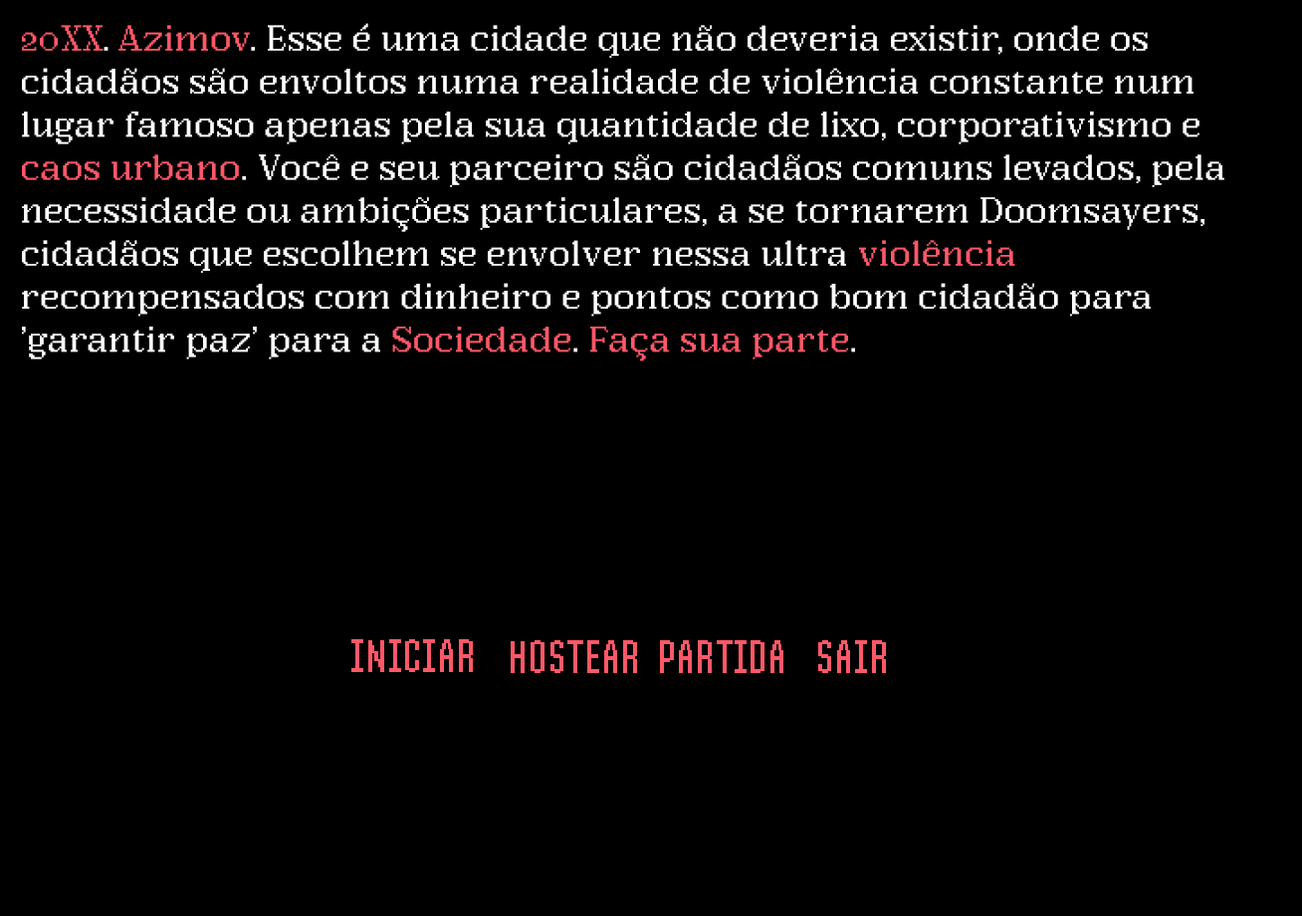
<style>
.page{position:relative;width:1302px;height:916px;background:#000000}
.page>*{position:absolute;margin:0}
.t1{font:35.8px "ArgentPixelCF-Regular";color:#ffffff}
.t2{font:35.8px "ArgentPixelCF-Regular";color:#ff5868}
.t3{font:47.8px "SHPinscher-Regular";color:#ff5868}
</style>
<div class="page">
<p class="t1" style="left:22px;top:23px;width:1202px;height:338px"><span class="t2">20XX</span>. <span class="t2">Azimov</span>. Esse é uma cidade que não deveria existir, onde os cidadãos são envoltos numa realidade de violência constante num lugar famoso apenas pela sua quantidade de lixo, corporativismo e <span class="t2">caos urbano</span>. Você e seu parceiro são cidadãos comuns levados, pela necessidade ou ambições particulares, a se tornarem Doomsayers, cidadãos que escolhem se envolver nessa ultra <span class="t2">violência</span> recompensados com dinheiro e pontos como bom cidadão para 'garantir paz' para a <span class="t2">Sociedade</span>. <span class="t2">Faça sua parte</span>.</p>
<p class="t3" style="left:351px;top:639px;width:122px;height:33px">INICIAR</p>
<p class="t3" style="left:511px;top:640px;width:272px;height:33px">HOSTEAR PARTIDA</p>
<p class="t3" style="left:818px;top:640px;width:68px;height:33px">SAIR</p>
</div>
